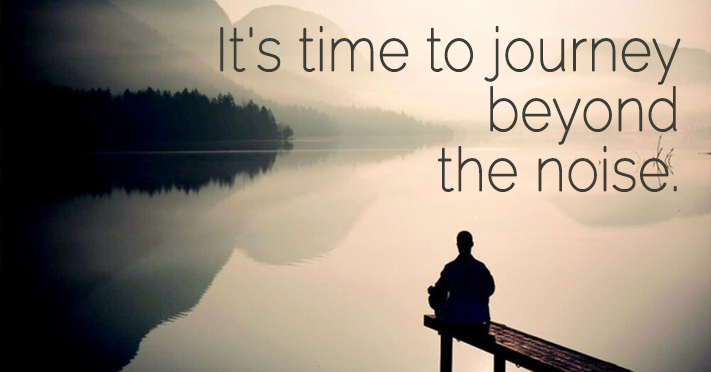
<style>
.page{position:relative;width:711px;height:372px}
.page>*{position:absolute;margin:0}
.t1{font:60px/60px "Raleway-Thin";color:#3b3d37;font-weight:bold;scale:0.9 1}
</style>
<div class="page">
<p class="t1" style="left:220px;top:26px;width:461px;height:166px;text-align:right">It's time to journey beyond <br>the noise.</p>
</div>
